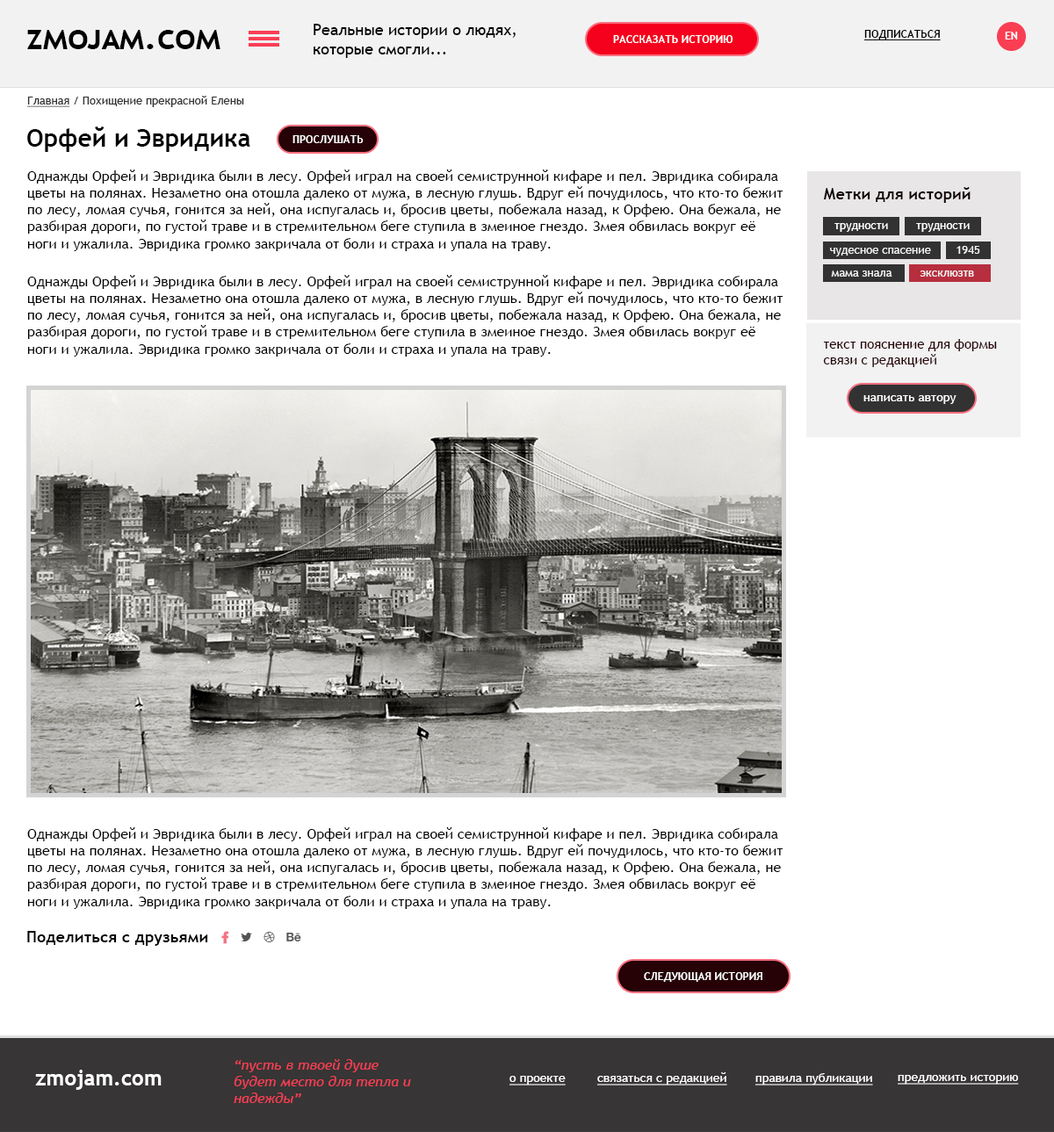
<style>
.page{position:relative;width:1054px;height:1132px;background:#ffffff}
.page>*{position:absolute;margin:0}
.t1{font:35.1px "TrebuchetMS-Bold";color:#000001;font-variant:small-caps}
.t2{font:15.8px "TrebuchetMS";color:#000000;font-variant:small-caps}
.t3{font:10.5px "TrebuchetMS-Bold";color:#000000;text-transform:uppercase;text-decoration:underline}
.t4{font:10.5px "TrebuchetMS-Bold";color:#ffffff;text-transform:uppercase}
.t5{font:11.4px "TrebuchetMS";color:#333232;font-variant:small-caps}
.t6{font:11.4px "TrebuchetMS";color:#333232;font-variant:small-caps;text-decoration:underline}
.t7{font:24.6px "TrebuchetMS-Bold";color:#000000;font-variant:small-caps}
.t8{font:14px "TrebuchetMS";color:#000000;font-variant:small-caps}
.t9{font:15.8px "TrebuchetMS-Bold";color:#100204;font-variant:small-caps}
.t10{font:11.4px "TrebuchetMS";color:#f2f2f2;font-variant:small-caps}
.t11{font:13.2px "TrebuchetMS";color:#260206;font-variant:small-caps}
.t12{font:12.3px "TrebuchetMS";color:#ffffff;font-variant:small-caps}
.t13{font:15.8px "TrebuchetMS-Bold";color:#010000;font-variant:small-caps}
.t14{font:14px "TrebuchetMS-Italic";color:#fa3e54}
.t15{font:21.1px "TrebuchetMS-Bold";color:#ffffff}
.t16{font:12.3px "TrebuchetMS";color:#ffffff;text-decoration:underline}
</style>
<div class="page">
<p class="t1" style="left:27px;top:30px;width:193px;height:19px">zmojam.com</p>
<p class="t2" style="left:313px;top:24px;width:202px;height:34px">Реальные истории о людях, <br>которые смогли...</p>
<p class="t3" style="left:864px;top:30px;width:76px;height:10px">подписаться</p>
<p class="t4" style="left:613px;top:35px;width:120px;height:8px">рассказать историю</p>
<p class="t4" style="left:1004px;top:32px;width:14px;height:8px">EN</p>
<p class="t5" style="left:27px;top:96px;width:217px;height:11px"><span class="t6">Главная</span> / Похищение прекрасной Елены</p>
<p class="t7" style="left:27px;top:126px;width:223px;height:26px">Орфей и Эвридика</p>
<p class="t4" style="left:292px;top:135px;width:71px;height:8px">прослушать</p>
<p class="t8" style="left:27px;top:169px;width:756px;height:82px">Однажды Орфей и Эвридика были в лесу. Орфей играл на своей семиструнной кифаре и пел. Эвридика собирала цветы на полянах. Незаметно она отошла далеко от мужа, в лесную глушь. Вдруг ей почудилось, что кто-то бежит по лесу, ломая сучья, гонится за ней, она испугалась и, бросив цветы, побежала назад, к Орфею. Она бежала, не разбирая дороги, по густой траве и в стремительном беге ступила в змеиное гнездо. Змея обвилась вокруг её ноги и ужалила. Эвридика громко закричала от боли и страха и упала на траву.</p>
<p class="t9" style="left:824px;top:187px;width:146px;height:16px">Метки для историй</p>
<p class="t10" style="left:956px;top:246px;width:24px;height:8px">1945</p>
<p class="t10" style="left:830px;top:248px;width:101px;height:8px">чудесное спасение</p>
<p class="t8" style="left:27px;top:275px;width:756px;height:81px">Однажды Орфей и Эвридика были в лесу. Орфей играл на своей семиструнной кифаре и пел. Эвридика собирала цветы на полянах. Незаметно она отошла далеко от мужа, в лесную глушь. Вдруг ей почудилось, что кто-то бежит по лесу, ломая сучья, гонится за ней, она испугалась и, бросив цветы, побежала назад, к Орфею. Она бежала, не разбирая дороги, по густой траве и в стремительном беге ступила в змеиное гнездо. Змея обвилась вокруг её ноги и ужалила. Эвридика громко закричала от боли и страха и упала на траву.</p>
<p class="t10" style="left:831px;top:270px;width:61px;height:7px">мама знала</p>
<p class="t10" style="left:919px;top:270px;width:55px;height:7px">эксклюзтв</p>
<p class="t11" style="left:823px;top:339px;width:174px;height:28px">текст пояснение для формы связи с редакцией</p>
<p class="t12" style="left:863px;top:395px;width:93px;height:9px">написать автору</p>
<p class="t8" style="left:27px;top:827px;width:756px;height:82px">Однажды Орфей и Эвридика были в лесу. Орфей играл на своей семиструнной кифаре и пел. Эвридика собирала цветы на полянах. Незаметно она отошла далеко от мужа, в лесную глушь. Вдруг ей почудилось, что кто-то бежит по лесу, ломая сучья, гонится за ней, она испугалась и, бросив цветы, побежала назад, к Орфею. Она бежала, не разбирая дороги, по густой траве и в стремительном беге ступила в змеиное гнездо. Змея обвилась вокруг её ноги и ужалила. Эвридика громко закричала от боли и страха и упала на траву.</p>
<p class="t13" style="left:27px;top:931px;width:181px;height:15px">Поделиться с друзьями</p>
<p class="t4" style="left:644px;top:972px;width:118px;height:10px">следующая история</p>
<p class="t14" style="left:234px;top:1059px;width:177px;height:44px">“пусть в твоей душе <br>будет место для тепла и надежды”</p>
<p class="t15" style="left:35px;top:1069px;width:127px;height:21px">zmojam.com</p>
<p class="t16" style="left:597px;top:1072px;width:130px;height:13px">связаться с редакцией</p>
<p class="t16" style="left:755px;top:1073px;width:118px;height:12px">правила публикации</p>
<p class="t16" style="left:509px;top:1076px;width:56px;height:9px">о проекте</p>
<p class="t16" style="left:897px;top:1075px;width:121px;height:9px">предложить историю</p>
</div>
